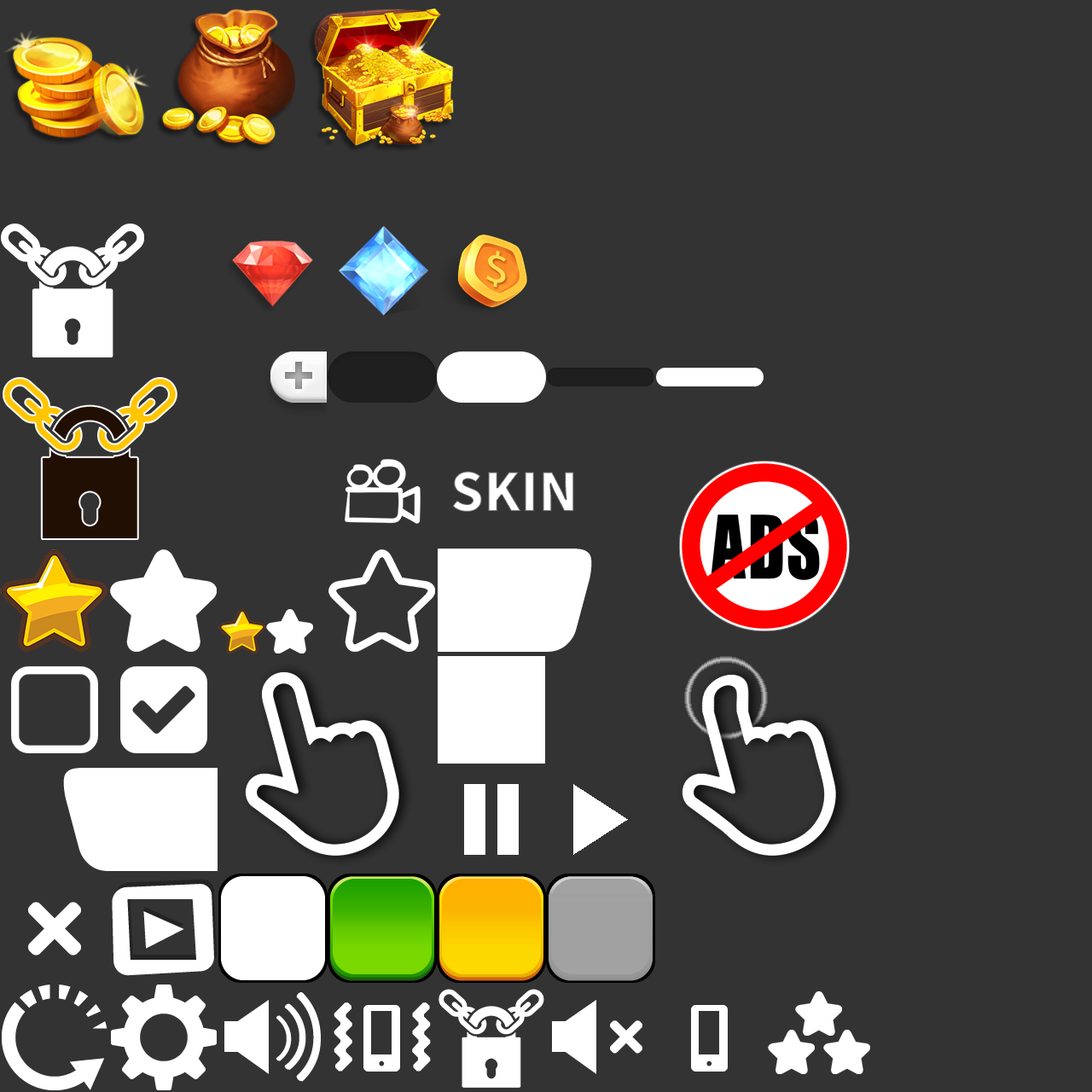
<style>
.page{position:relative;width:1092px;height:1092px;background:#333333}
.page>*{position:absolute;margin:0}
.t1{font:59.7px "SourceSansRoman-Bold";color:#ffffff}
</style>
<div class="page">
<p class="t1" style="left:452px;top:471px;width:122px;height:41px">SKIN</p>
</div>
